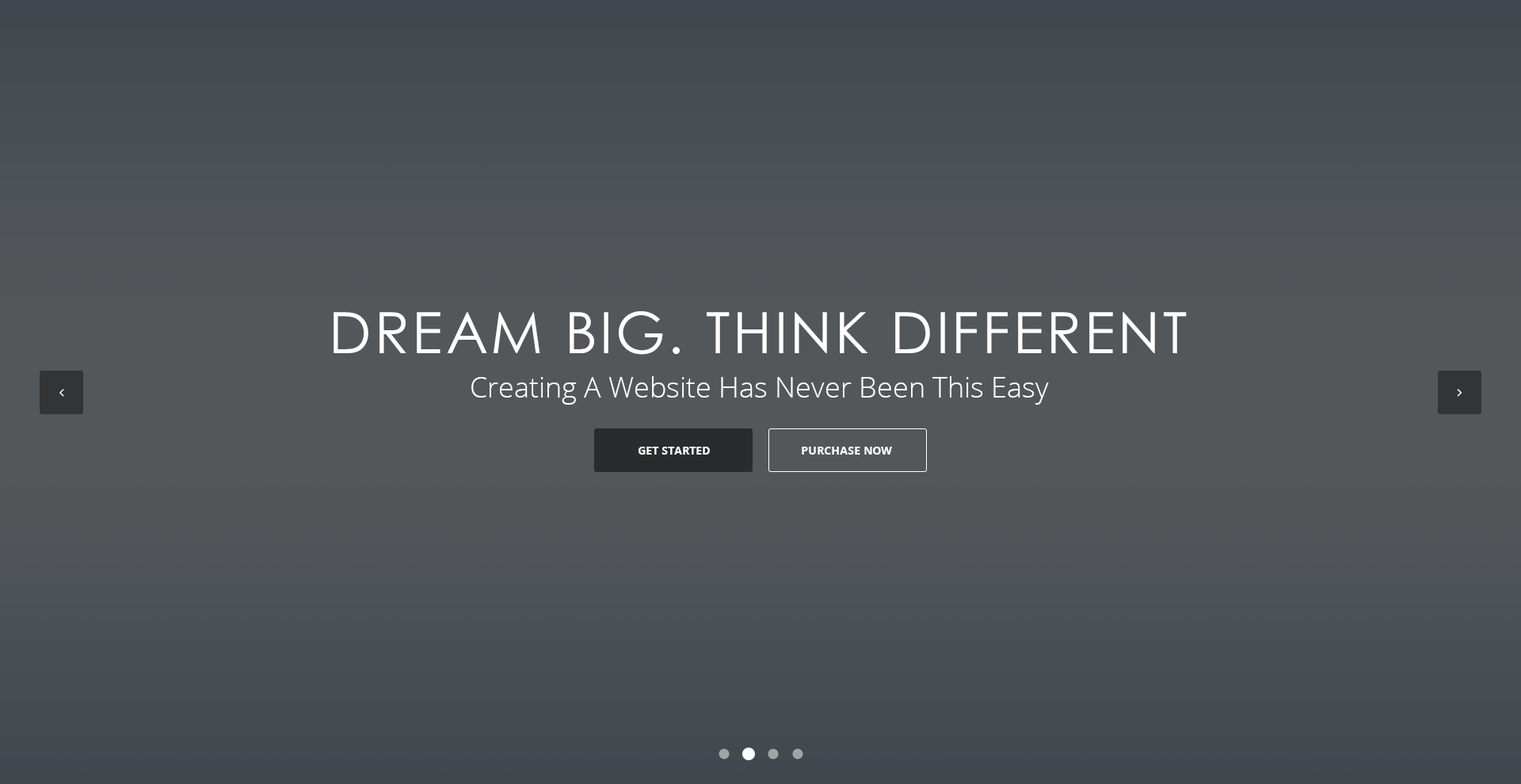
<style>
.page{position:relative;width:1521px;height:784px;background:#53575a}
.page>*{position:absolute;margin:0}
.t1{font:57px "CenturyGothic";letter-spacing:0.05em;color:#ffffff}
.t2{font:28.5px "OpenSans-Light";color:#ffffff}
.t3{font:11.1px "OpenSans-Bold";color:#ffffff}
</style>
<div class="page">
<p class="t1" style="left:333px;top:311px;width:853px;height:44px">DREAM BIG. THINK DIFFERENT</p>
<p class="t2" style="left:471px;top:376px;width:578px;height:29px">Creating A Website Has Never Been This Easy</p>
<p class="t3" style="left:638px;top:447px;width:72px;height:8px">GET STARTED</p>
<p class="t3" style="left:802px;top:447px;width:90px;height:8px">PURCHASE NOW</p>
</div>
